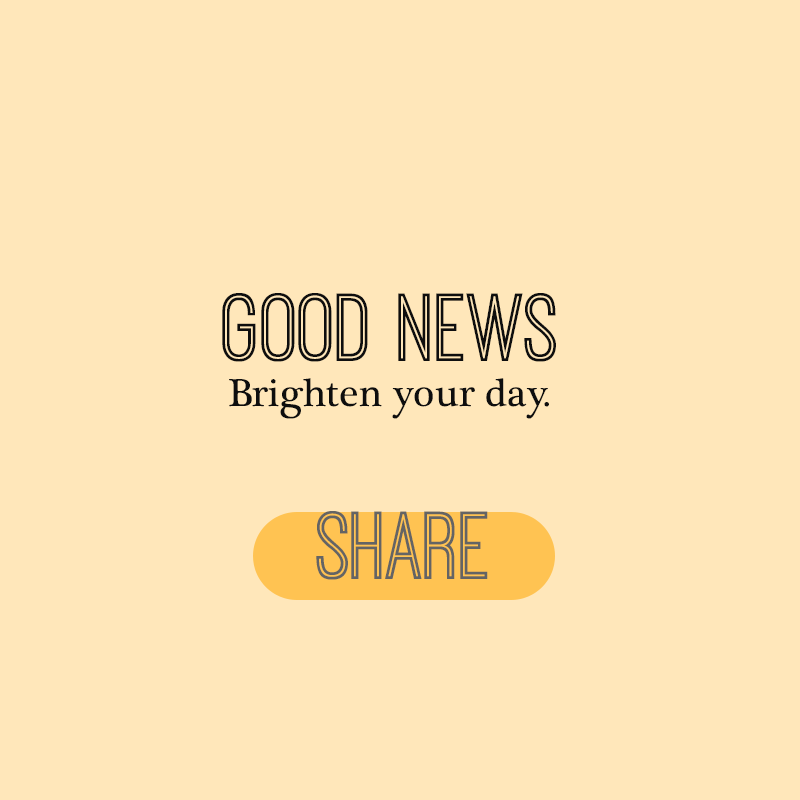
<style>
.page{position:relative;width:800px;height:800px;background:#ffe7ba}
.page>*{position:absolute;margin:0}
.t1{font:100px "OstrichSansInline";color:#0e0e0e}
.t2{font:40px "PlantagenetCherokee";color:#0e0e0e}
.t3{font:100px "OstrichSansInline";color:#646464}
</style>
<div class="page">
<p class="t1" style="left:222px;top:293px;width:334px;height:69px">GOOD NEWS</p>
<p class="t2" style="left:229px;top:378px;width:320px;height:41px">Brighten your day.</p>
<p class="t3" style="left:316px;top:511px;width:172px;height:69px">share</p>
</div>
